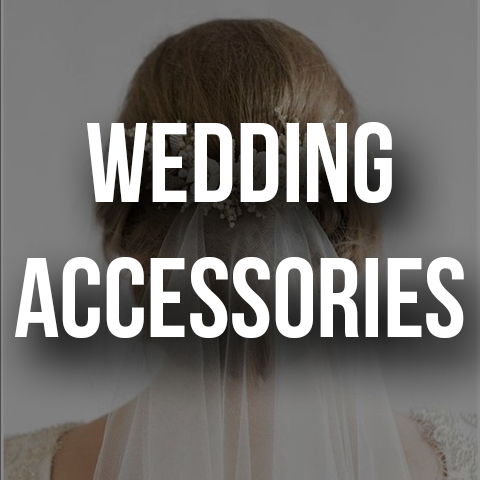
<style>
.page{position:relative;width:480px;height:480px}
.page>*{position:absolute;margin:0}
.t1{font:112.5px "BebasNeue";color:#ffffff}
</style>
<div class="page">
<p class="t1" style="left:15px;top:122px;width:449px;height:216px;text-align:center">wedding<br>accessories</p>
</div>
